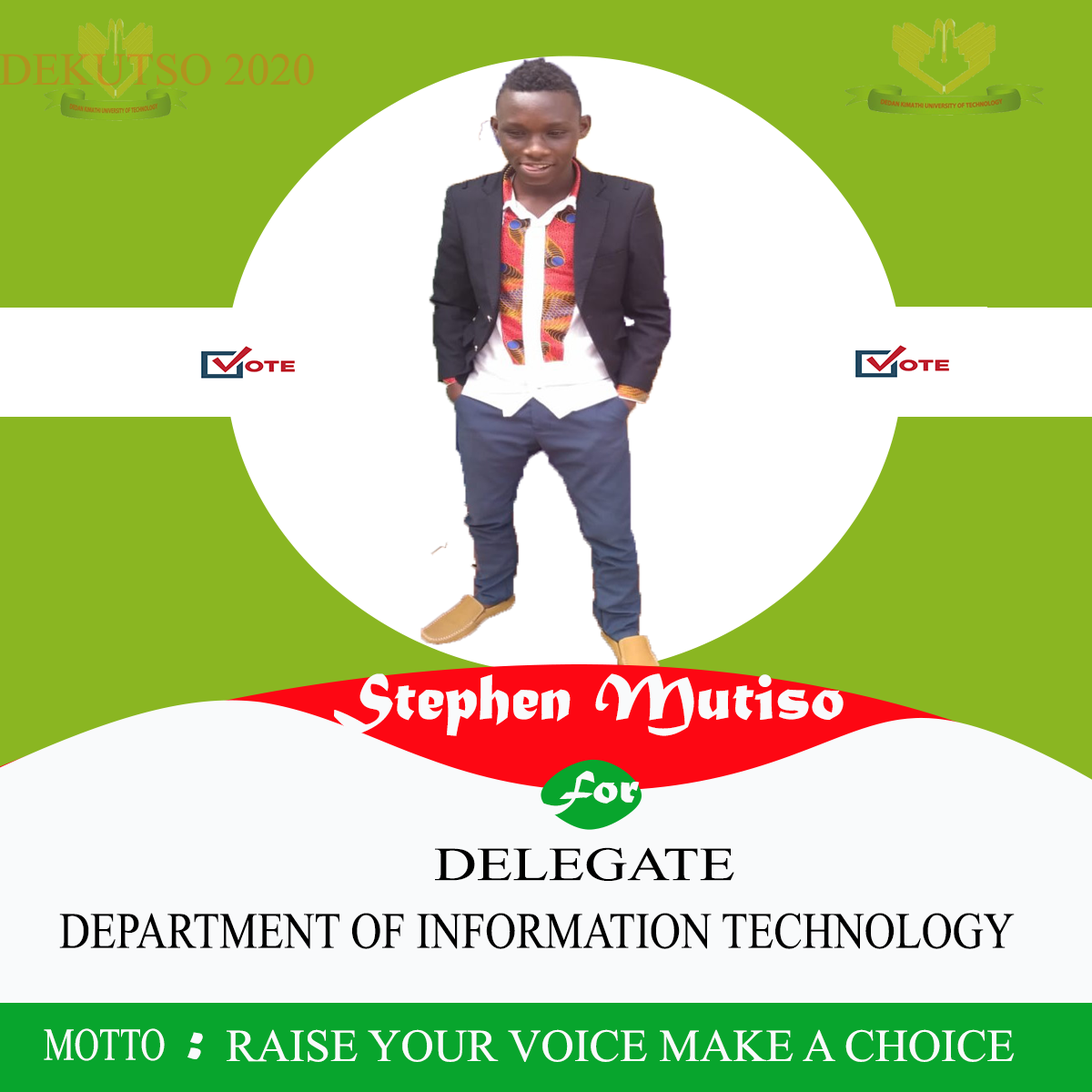
<style>
.page{position:relative;width:1092px;height:1092px;background:#8ab622}
.page>*{position:absolute;margin:0}
.t1{font:68.2px "Microsoft-Himalaya";color:#af941e}
.t2{font:68.2px "MaturaMTScriptCapitals";color:#f9fafb}
.t3{font:47.8px "MaturaMTScriptCapitals";color:#f9fafb;scale:1.09 1}
.t4{font:70.8px "Microsoft-Himalaya";color:#000000;scale:1.24 1}
.t5{font:76.5px "Microsoft-Himalaya";color:#000000;scale:0.84 1}
.t6{font:68.2px "Microsoft-Himalaya";color:#f9fafb;scale:0.75 1}
.t7{font:68.2px "Microsoft-Himalaya";color:#f9fafb}
</style>
<div class="page">
<p class="t1" style="left:0px;top:53px;width:314px;height:33px">DEKUTSO 2020</p>
<p class="t2" style="left:334px;top:673px;width:510px;height:63px">Stephen  Mutiso</p>
<p class="t3" style="left:531px;top:771px;width:109px;height:44px">For</p>
<p class="t4" style="left:435px;top:847px;width:299px;height:34px">DELEGATE</p>
<p class="t5" style="left:59px;top:913px;width:956px;height:36px">DEPARTMENT OF INFORMATION TECHNOLOGY</p>
<p class="t6" style="left:44px;top:1028px;width:121px;height:33px">MOTTO</p>
<p class="t7" style="left:187px;top:1029px;width:828px;height:33px"><span class="t2">: </span>RAISE YOUR VOICE MAKE A CHOICE</p>
</div>
